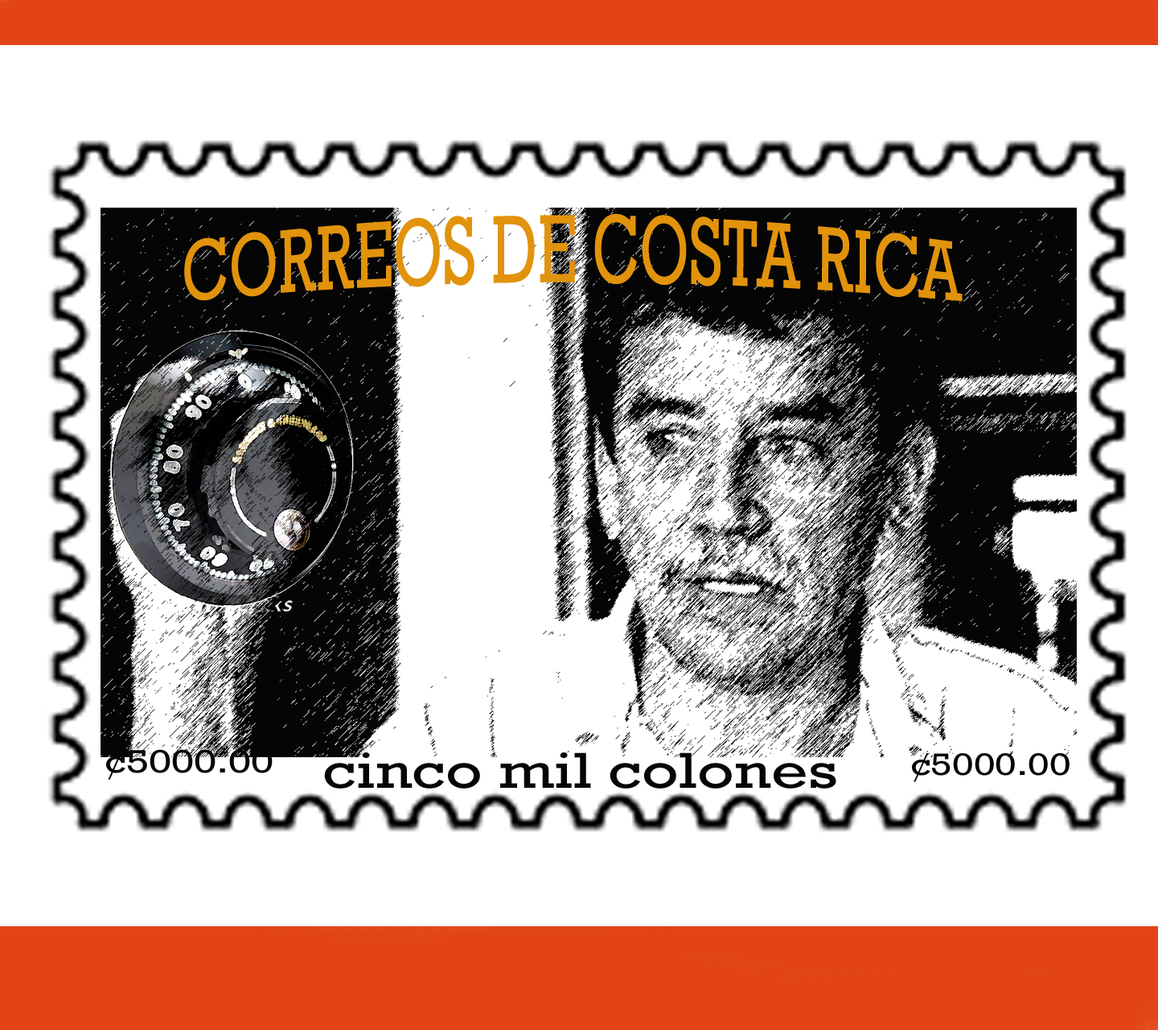
<style>
.page{position:relative;width:1158px;height:1030px;background:#ffffff}
.page>*{position:absolute;margin:0}
.t1{font:69.6px "Rockwell";color:#e2930c;scale:0.89 1}
.t2{font:33px "Rockwell";color:#050505;scale:1.26 1}
.t3{font:51.2px "Rockwell";color:#050505;scale:1.26 1}
.t4{font:31.3px "Rockwell";color:#050505;scale:1.26 1}
</style>
<div class="page">
<p class="t1" style="left:184px;top:213px;width:779px;height:89px">CORREOS DE COSTA RICA</p>
<p class="t2" style="left:106px;top:749px;width:167px;height:30px">¢5000.00</p>
<p class="t3" style="left:324px;top:752px;width:512px;height:36px">cinco mil colones</p>
<p class="t4" style="left:912px;top:753px;width:158px;height:29px">¢5000.00</p>
</div>
